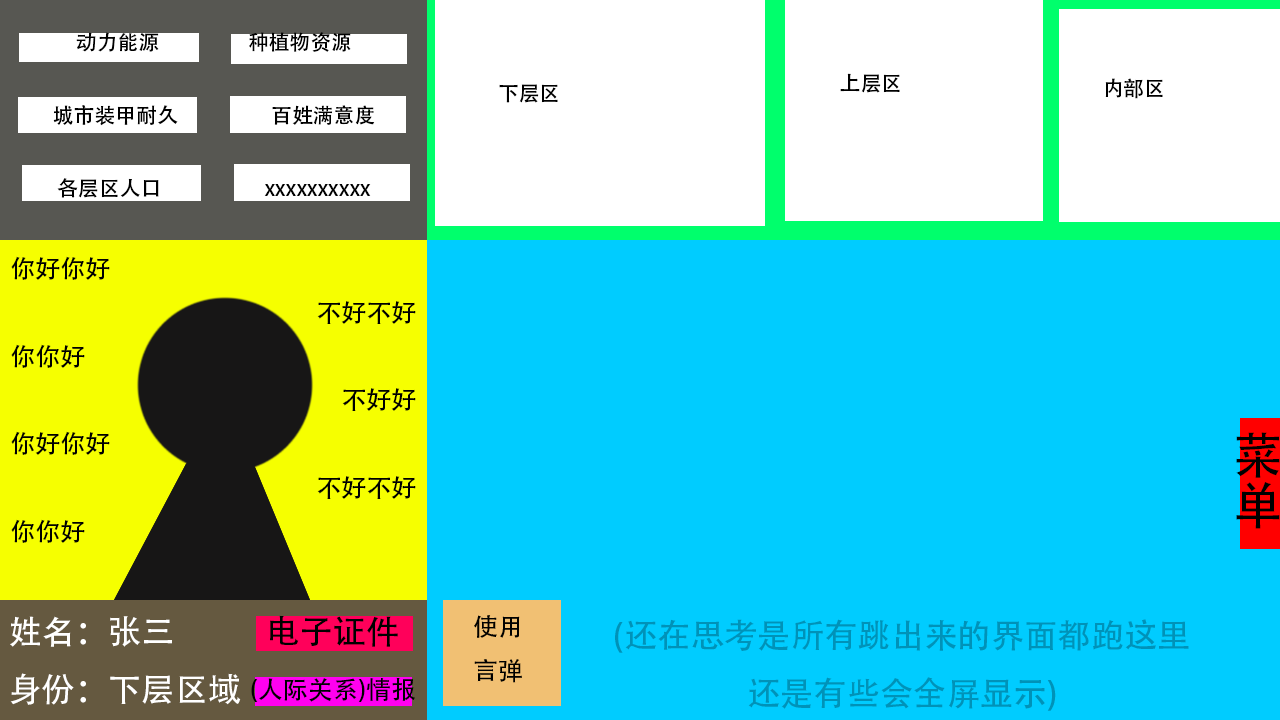
<style>
.page{position:relative;width:1280px;height:720px;background:#00ccff}
.page>*{position:absolute;margin:0}
.t1{font:20.8px "AdobeHeitiStd-Regular";color:#000000}
.t2{font:50px "AdobeHeitiStd-Regular";color:#000000}
.t3{font:33.3px "AdobeHeitiStd-Regular";color:#ffffff}
.t4{font:33.3px "AdobeHeitiStd-Regular";color:#000000}
.t5{font:25px "AdobeHeitiStd-Regular";color:#000000}
.t6{font:33.3px "AdobeHeitiStd-Regular";color:#0092b8}
</style>
<div class="page">
<p class="t1" style="left:53px;top:32px;width:322px;height:166px;text-align:center">动力能源                   种植物资源<br><br>城市装甲耐久                    百姓满意度<br><br>各层区人口                      xxxxxxxxxx</p>
<p class="t1" style="left:840px;top:73px;width:60px;height:20px">上层区</p>
<p class="t1" style="left:1105px;top:78px;width:58px;height:21px">内部区</p>
<p class="t1" style="left:499px;top:84px;width:59px;height:19px">下层区</p>
<p class="t2" style="left:1236px;top:432px;width:44px;height:97px;text-align:center">菜单</p>
<p class="t3" style="left:10px;top:616px;width:231px;height:89px">姓名：张三<br>身份：下层区域</p>
<p class="t4" style="left:270px;top:615px;width:128px;height:32px">电子证件</p>
<p class="t5" style="left:474px;top:615px;width:48px;height:68px;text-align:center">使用<br>言弹</p>
<p class="t6" style="left:615px;top:619px;width:574px;height:92px;text-align:center">(还在思考是所有跳出来的界面都跑这里<br>还是有些会全屏显示)</p>
<p class="t5" style="left:251px;top:677px;width:164px;height:25px">(人际关系)情报</p>
</div>
